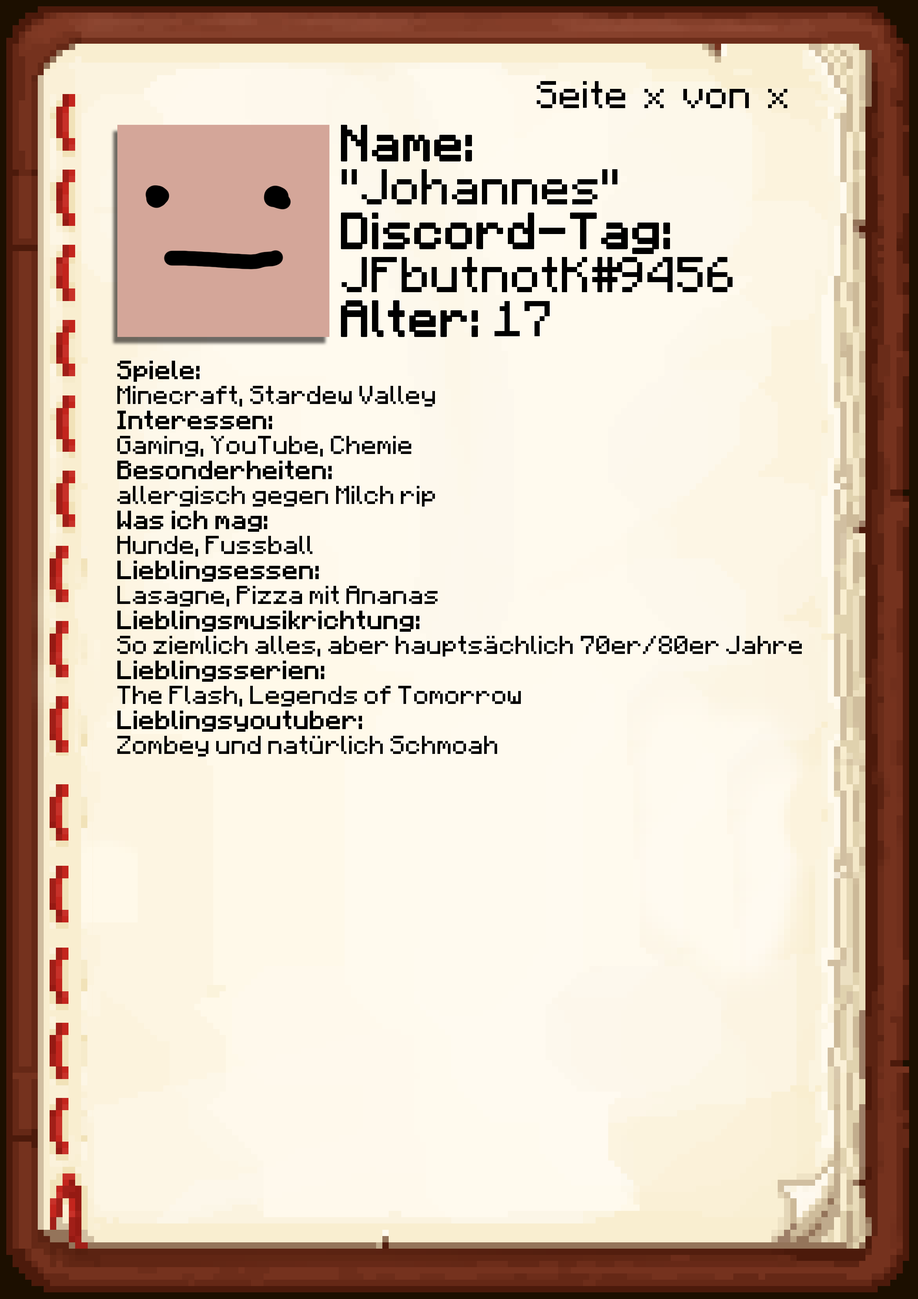
<style>
.page{position:relative;width:918px;height:1299px}
.page>*{position:absolute;margin:0}
.t1{font:38.6px "Minecraft-Regular";color:#000000}
.t2{font:40.1px/43.9px "Minecraft";color:#000000}
.t3{font:40.1px/43.9px "Minecraft";color:#000000;font-weight:bold}
.t4{font:20.8px "Minecraft";color:#000000}
.t5{font:20.8px "Minecraft";color:#000000;font-weight:bold}
</style>
<div class="page">
<p class="t1" style="left:537px;top:81px;width:250px;height:27px">Seite x von x</p>
<p class="t2" style="left:341px;top:125px;width:392px;height:212px"><span class="t3">Name:<br></span>"Johannes"<br><span class="t3">Discord-Tag:<br></span>JFbutnotK#9456<br><span class="t3">Alter: </span>17</p>
<p class="t4" style="left:117px;top:361px;width:685px;height:395px"><span class="t5">Spiele: <br></span>Minecraft, Stardew Valley<br><span class="t5">Interessen:<br></span>Gaming, YouTube, Chemie<br><span class="t5">Besonderheiten:<br></span>allergisch gegen Milch rip<br><span class="t5">Was ich mag:<br></span>Hunde, Fussball<br><span class="t5">Lieblingsessen:<br></span>Lasagne, Pizza mit Ananas<br><span class="t5">Lieblingsmusikrichtung:<br></span>So ziemlich alles, aber hauptsächlich 70er/80er Jahre<br><span class="t5">Lieblingsserien:<br></span>The Flash, Legends of Tomorrow<br><span class="t5">Lieblingsyoutuber:<br></span>Zombey und natürlich Schmoah</p>
</div>
